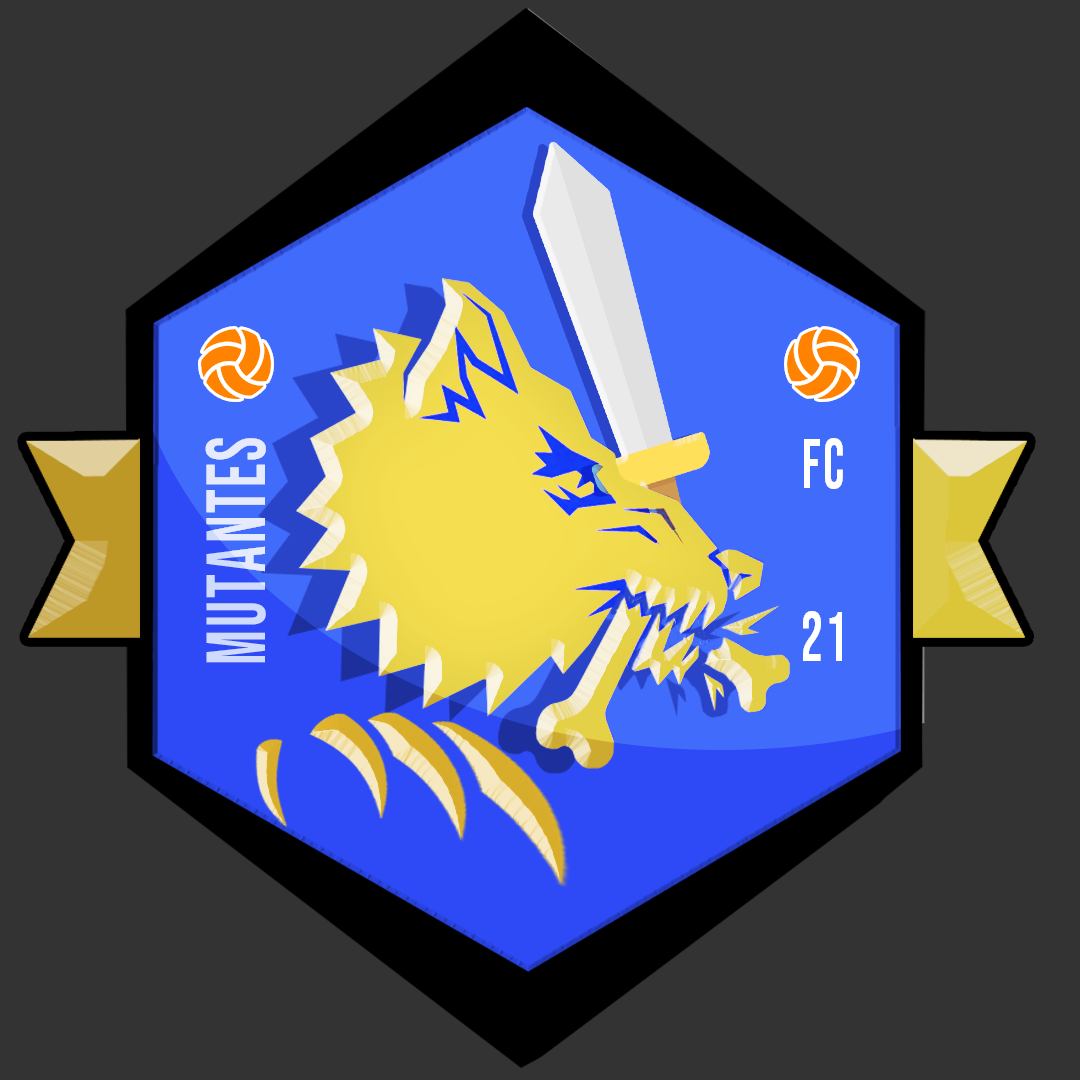
<style>
.page{position:relative;width:1080px;height:1080px;background:#333333}
.page>*{position:absolute;margin:0}
.t1{font:83.6px "BebasNeue-Regular";letter-spacing:0.04em;color:#cfdbfc;scale:0.78 1}
.t2{font:70.5px "BebasNeue-Regular";letter-spacing:0.04em;color:#ffffff;scale:0.78 1}
</style>
<div class="page">
<p class="t1" style="left:205px;top:438px;width:61px;height:225px;rotate:-90deg">mutantes</p>
<p class="t2" style="left:804px;top:438px;width:39px;height:51px">fc</p>
<p class="t2" style="left:803px;top:611px;width:39px;height:50px">21</p>
</div>
